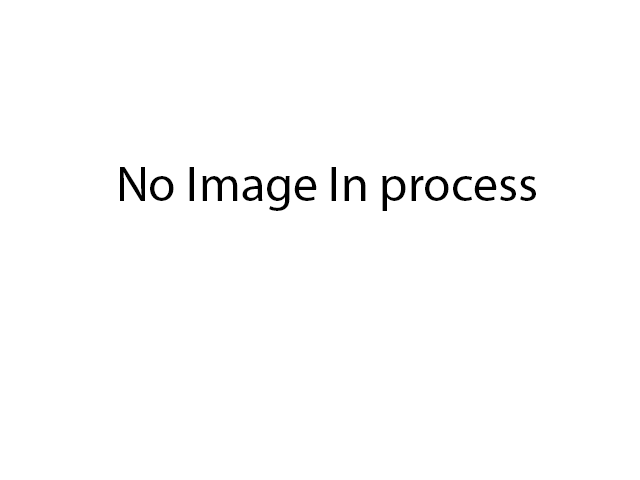
<style>
.page{position:relative;width:640px;height:480px;background:#ffffff}
.page>*{position:absolute;margin:0}
.t1{font:50px "MyriadPro-Regular";color:#000000}
</style>
<div class="page">
<p class="t1" style="left:120px;top:167px;width:416px;height:44px">No Image In process</p>
</div>
